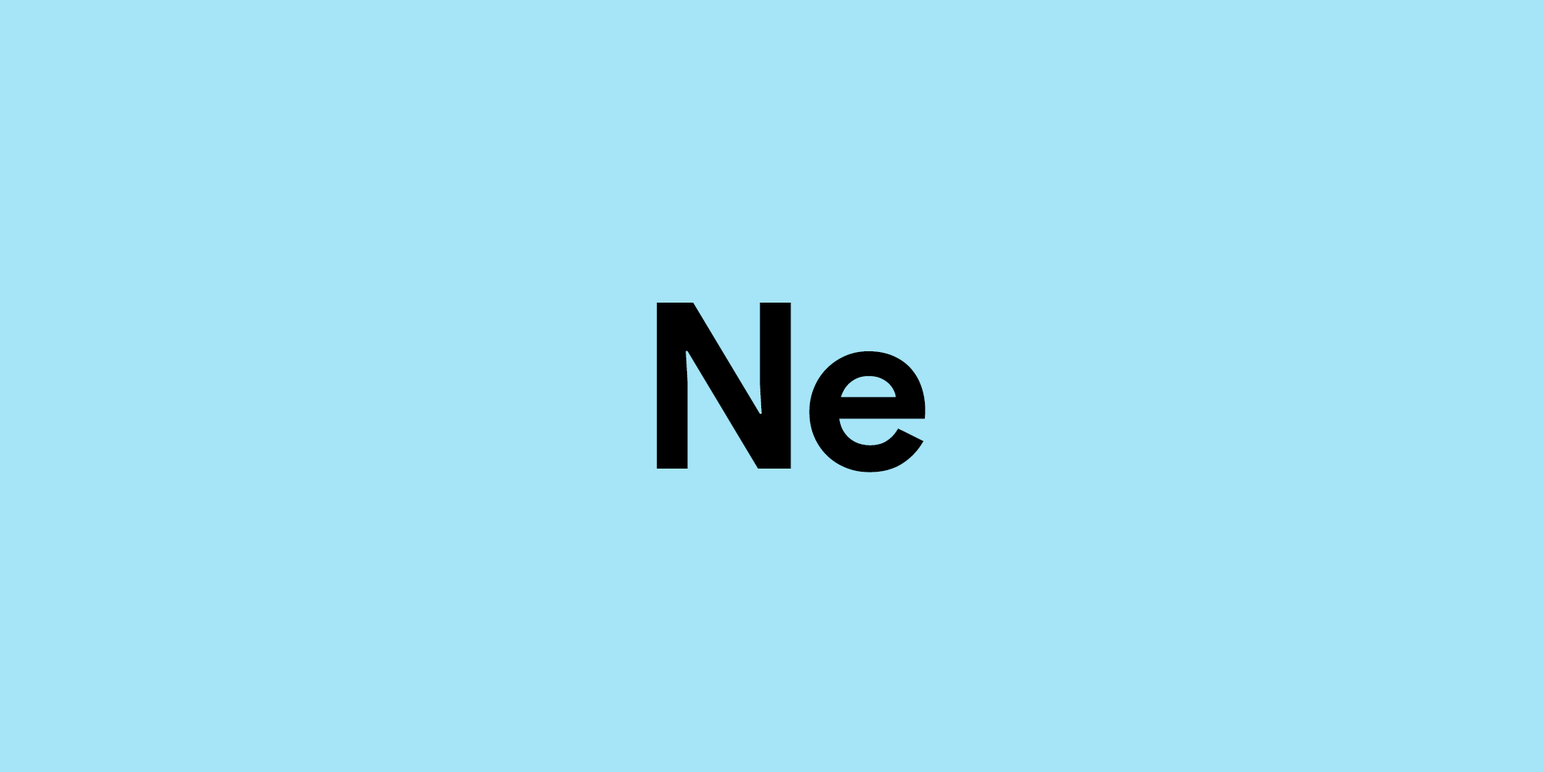
<style>
.page{position:relative;width:1544px;height:772px;background:#a5e5f7}
.page>*{position:absolute;margin:0}
.t1{font:231.6px "ProductSans-Bold";letter-spacing:-0.02em;color:#000000}
.t2{font:231.6px "ProductSans-Bold";letter-spacing:-0.02em;color:#ffffff}
</style>
<div class="page">
<p class="t1" style="left:656px;top:303px;width:270px;height:170px"><span class="t2"> </span>Ne</p>
</div>
